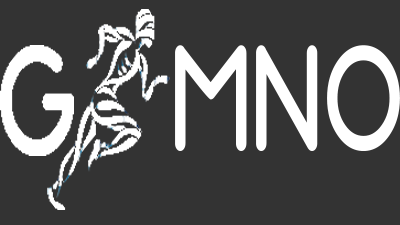
<style>
.page{position:relative;width:400px;height:225px;background:#333333}
.page>*{position:absolute;margin:0}
.t1{font:151.1px "Neon80s";color:#ffffff;scale:0.69 1}
</style>
<div class="page">
<p class="t1" style="left:175px;top:45px;width:225px;height:106px">MNO</p>
</div>
